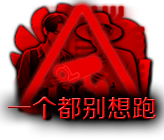
<style>
.page{position:relative;width:164px;height:140px}
.page>*{position:absolute;margin:0}
.t1{font:25px "FZZZHUNHJW--GB1-0"}
</style>
<div class="page">
<p class="t1" style="left:8px;top:96px;width:148px;height:24px">一个都别想跑</p>
</div>
